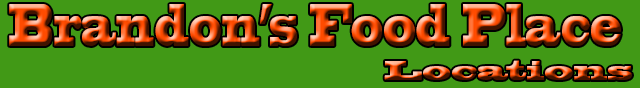
<style>
.page{position:relative;width:640px;height:88px;background:#419916}
.page>*{position:absolute;margin:0}
.t1{font:55.6px "BlackoakStd";scale:0.43 1}
.t2{font:25.6px "BlackoakStd";scale:0.84 1}
</style>
<div class="page">
<p class="t1" style="left:9px;top:4px;width:612px;height:42px">Brandon’s Food Place</p>
<p class="t2" style="left:384px;top:60px;width:248px;height:20px">Locations</p>
</div>
